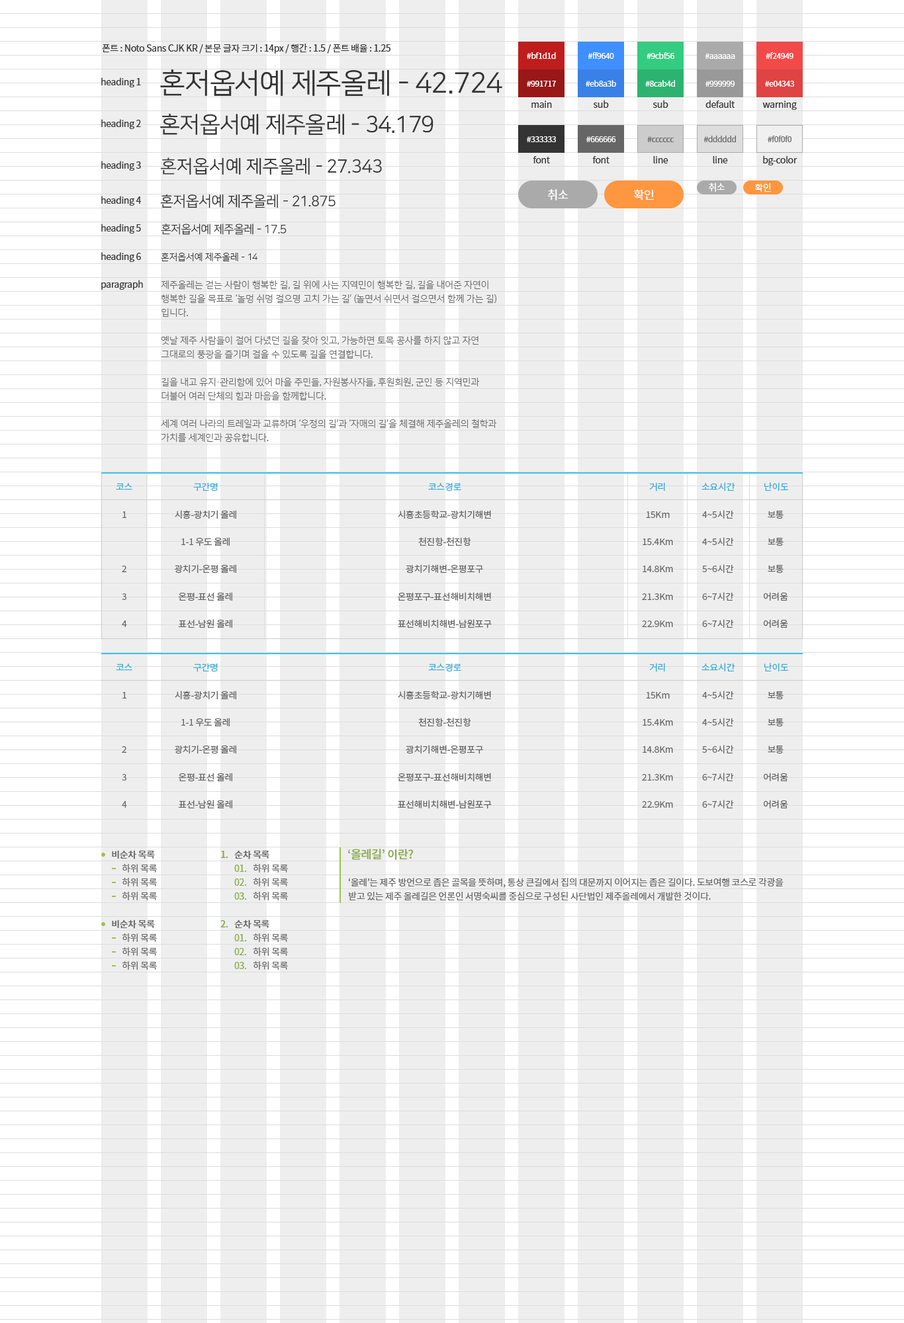
<style>
.page{position:relative;width:904px;height:1323px;background:#eeeeee}
.page>*{position:absolute;margin:0}
.t1{font:9.3px "NotoSansCJKkr-Regular";letter-spacing:-0.025em;color:#333333}
.t2{font:7.9px "NotoSansCJKkr-Regular";letter-spacing:-0.025em;color:#ffffff}
.t3{font:28.3px "NanumSquareR";letter-spacing:-0.025em;color:#333333}
.t4{font:22.6px "NanumSquareR";letter-spacing:-0.025em;color:#333333}
.t5{font:7.9px "NotoSansCJKkr-Regular";letter-spacing:-0.025em;color:#666666}
.t6{font:18.1px "NanumSquareR";letter-spacing:-0.025em;color:#333333}
.t7{font:9.3px "NotoSansCJKkr-Regular";letter-spacing:-0.025em;color:#ffffff}
.t8{font:14.5px "NanumSquareR";letter-spacing:-0.025em;color:#333333}
.t9{font:11.6px "NotoSansCJKkr-Regular";letter-spacing:-0.025em;color:#ffffff}
.t10{font:11.6px "NanumSquareR";letter-spacing:-0.025em;color:#333333}
.t11{font:9.3px "NanumSquareR";letter-spacing:-0.025em;color:#333333}
.t12{font:9.3px "NanumSquareR";letter-spacing:-0.025em;color:#666666}
.t13{font:9px "NotoSansCJKkr-Regular";letter-spacing:-0.025em;color:#36add9}
.t14{font:9px "NotoSansCJKkr-Regular";letter-spacing:-0.025em;color:#666666}
.t15{font:9.3px "NotoSansCJKkr-Medium";letter-spacing:-0.025em;color:#666666}
.t16{font:9.3px "NotoSansCJKkr-Medium";letter-spacing:-0.025em;color:#8cab4d}
.t17{font:11.6px "NotoSansCJKkr-Medium";letter-spacing:-0.025em;color:#8cab4d}
.t18{font:9.3px "NotoSansCJKkr-Regular";letter-spacing:-0.025em;color:#666666}
.t19{font:9.3px "NotoSansCJKkr-Regular";letter-spacing:-0.025em;color:#8cab4d}
</style>
<div class="page">
<p class="t1" style="left:102px;top:44px;width:288px;height:10px">폰트 : Noto Sans CJK KR / 본문 글자 크기 : 14px / 행간 : 1.5 / 폰트 배율 : 1.25</p>
<p class="t2" style="left:527px;top:52px;width:29px;height:7px">#bf1d1d</p>
<p class="t2" style="left:588px;top:52px;width:26px;height:7px">#ff9640</p>
<p class="t2" style="left:647px;top:52px;width:27px;height:7px">#9cbf56</p>
<p class="t2" style="left:705px;top:53px;width:30px;height:6px">#aaaaaa</p>
<p class="t2" style="left:766px;top:52px;width:27px;height:7px">#f24949</p>
<p class="t1" style="left:101px;top:77px;width:40px;height:10px">heading 1</p>
<p class="t3" style="left:160px;top:69px;width:342px;height:27px">혼저옵서예 제주올레 - 42.724</p>
<p class="t2" style="left:527px;top:81px;width:29px;height:6px">#991717</p>
<p class="t2" style="left:586px;top:80px;width:30px;height:7px">#eb8a3b</p>
<p class="t2" style="left:645px;top:80px;width:30px;height:7px">#8cab4d</p>
<p class="t2" style="left:705px;top:81px;width:30px;height:6px">#999999</p>
<p class="t2" style="left:765px;top:81px;width:29px;height:6px">#e04343</p>
<p class="t1" style="left:531px;top:101px;width:21px;height:7px">main</p>
<p class="t1" style="left:594px;top:100px;width:15px;height:8px">sub</p>
<p class="t1" style="left:653px;top:100px;width:15px;height:8px">sub</p>
<p class="t1" style="left:705px;top:100px;width:30px;height:8px">default</p>
<p class="t1" style="left:762px;top:101px;width:35px;height:9px">warning</p>
<p class="t4" style="left:160px;top:114px;width:273px;height:21px">혼저옵서예 제주올레 - 34.179</p>
<p class="t1" style="left:101px;top:119px;width:40px;height:10px">heading 2</p>
<p class="t2" style="left:527px;top:136px;width:29px;height:6px">#333333</p>
<p class="t2" style="left:586px;top:136px;width:30px;height:6px">#666666</p>
<p class="t5" style="left:647px;top:136px;width:27px;height:6px">#cccccc</p>
<p class="t5" style="left:703px;top:136px;width:33px;height:6px">#dddddd</p>
<p class="t5" style="left:768px;top:136px;width:23px;height:6px">#f0f0f0</p>
<p class="t1" style="left:101px;top:161px;width:40px;height:10px">heading 3</p>
<p class="t6" style="left:161px;top:157px;width:221px;height:18px">혼저옵서예 제주올레 - 27.343</p>
<p class="t1" style="left:533px;top:156px;width:17px;height:7px">font</p>
<p class="t1" style="left:592px;top:156px;width:17px;height:7px">font</p>
<p class="t1" style="left:653px;top:156px;width:15px;height:7px">line</p>
<p class="t1" style="left:713px;top:156px;width:15px;height:7px">line</p>
<p class="t1" style="left:763px;top:156px;width:34px;height:9px">bg-color</p>
<p class="t7" style="left:709px;top:183px;width:16px;height:9px">취소</p>
<p class="t7" style="left:755px;top:183px;width:16px;height:9px">확인</p>
<p class="t1" style="left:101px;top:196px;width:40px;height:10px">heading 4</p>
<p class="t8" style="left:160px;top:194px;width:176px;height:14px">혼저옵서예 제주올레 - 21.875</p>
<p class="t9" style="left:547px;top:189px;width:21px;height:12px">취소</p>
<p class="t9" style="left:634px;top:189px;width:20px;height:12px">확인</p>
<p class="t1" style="left:101px;top:224px;width:40px;height:10px">heading 5</p>
<p class="t10" style="left:161px;top:224px;width:126px;height:11px">혼저옵서예 제주올레 - 17.5</p>
<p class="t1" style="left:101px;top:252px;width:40px;height:10px">heading 6</p>
<p class="t11" style="left:161px;top:253px;width:96px;height:8px">혼저옵서예 제주올레 - 14</p>
<p class="t1" style="left:101px;top:280px;width:42px;height:10px">paragraph</p>
<p class="t12" style="left:161px;top:281px;width:335px;height:161px">제주올레는 걷는 사람이 행복한 길, 길 위에 사는 지역민이 행복한 길, 길을 내어준 자연이 행복한 길을 목표로 ‘놀멍 쉬멍 걸으명 고치 가는 길’ (놀면서 쉬면서 걸으면서 함께 가는 길) 입니다.<br>옛날 제주 사람들이 걸어 다녔던 길을 찾아 잇고, 가능하면 토목 공사를 하지 않고 자연 그대로의 풍광을 즐기며 걸을 수 있도록 길을 연결합니다.<br>길을 내고 유지·관리함에 있어 마을 주민들, 자원봉사자들, 후원회원, 군인 등 지역민과 더불어 여러 단체의 힘과 마음을 함께합니다.<br>세계 여러 나라의 트레일과 교류하며 ‘우정의 길’과 ‘자매의 길’을 체결해 제주올레의 철학과 가치를 세계인과 공유합니다.</p>
<p class="t13" style="left:116px;top:483px;width:16px;height:7px">코스</p>
<p class="t13" style="left:193px;top:482px;width:25px;height:10px">구간명</p>
<p class="t13" style="left:428px;top:483px;width:33px;height:9px">코스경로</p>
<p class="t13" style="left:649px;top:482px;width:16px;height:10px">거리</p>
<p class="t13" style="left:701px;top:482px;width:34px;height:9px">소요시간</p>
<p class="t13" style="left:764px;top:482px;width:25px;height:9px">난이도</p>
<p class="t14" style="left:122px;top:512px;width:5px;height:115px;text-align:center">1<br><br>2<br>3<br>4</p>
<p class="t14" style="left:175px;top:510px;width:61px;height:119px;text-align:center">시흥-광치기 올레<br>1-1 우도 올레<br>광치기-온평 올레<br>온평-표선 올레<br>표선-남원 올레</p>
<p class="t14" style="left:398px;top:510px;width:94px;height:119px;text-align:center">시흥초등학교-광치기해변<br>천진항-천진항<br>광치기해변-온평포구<br>온평포구-표선해비치해변<br>표선해비치해변-남원포구</p>
<p class="t14" style="left:642px;top:512px;width:31px;height:115px;text-align:center">15Km<br>15.4Km<br>14.8Km<br>21.3Km<br>22.9Km</p>
<p class="t14" style="left:702px;top:510px;width:32px;height:118px;text-align:center">4~5시간<br>4~5시간<br>5~6시간<br>6~7시간<br>6~7시간</p>
<p class="t14" style="left:764px;top:511px;width:24px;height:117px;text-align:center">보통<br>보통<br>보통<br>어려움<br>어려움</p>
<p class="t13" style="left:116px;top:664px;width:16px;height:7px">코스</p>
<p class="t13" style="left:193px;top:663px;width:25px;height:9px">구간명</p>
<p class="t13" style="left:428px;top:664px;width:33px;height:8px">코스경로</p>
<p class="t13" style="left:649px;top:663px;width:16px;height:9px">거리</p>
<p class="t13" style="left:701px;top:663px;width:34px;height:9px">소요시간</p>
<p class="t13" style="left:764px;top:663px;width:25px;height:9px">난이도</p>
<p class="t14" style="left:122px;top:692px;width:5px;height:116px;text-align:center">1<br><br>2<br>3<br>4</p>
<p class="t14" style="left:175px;top:691px;width:61px;height:118px;text-align:center">시흥-광치기 올레<br>1-1 우도 올레<br>광치기-온평 올레<br>온평-표선 올레<br>표선-남원 올레</p>
<p class="t14" style="left:398px;top:691px;width:94px;height:118px;text-align:center">시흥초등학교-광치기해변<br>천진항-천진항<br>광치기해변-온평포구<br>온평포구-표선해비치해변<br>표선해비치해변-남원포구</p>
<p class="t14" style="left:642px;top:692px;width:31px;height:116px;text-align:center">15Km<br>15.4Km<br>14.8Km<br>21.3Km<br>22.9Km</p>
<p class="t14" style="left:702px;top:691px;width:32px;height:118px;text-align:center">4~5시간<br>4~5시간<br>5~6시간<br>6~7시간<br>6~7시간</p>
<p class="t14" style="left:764px;top:692px;width:24px;height:117px;text-align:center">보통<br>보통<br>보통<br>어려움<br>어려움</p>
<p class="t15" style="left:112px;top:850px;width:43px;height:79px">비순차 목록<br><br><br><br><br>비순차 목록</p>
<p class="t16" style="left:220px;top:851px;width:8px;height:77px">1.<br><br><br><br><br>2.</p>
<p class="t15" style="left:234px;top:850px;width:35px;height:79px">순차 목록<br><br><br><br><br>순차 목록</p>
<p class="t17" style="left:348px;top:849px;width:66px;height:11px">‘올레길’ 이란?</p>
<p class="t18" style="left:122px;top:864px;width:35px;height:106px">하위 목록<br>하위 목록<br>하위 목록<br><br><br>하위 목록<br>하위 목록<br>하위 목록</p>
<p class="t19" style="left:234px;top:865px;width:13px;height:104px">01.<br>02.<br>03.<br><br><br>01.<br>02.<br>03.</p>
<p class="t18" style="left:253px;top:864px;width:35px;height:106px">하위 목록<br>하위 목록<br>하위 목록<br><br><br>하위 목록<br>하위 목록<br>하위 목록</p>
<p class="t18" style="left:348px;top:878px;width:436px;height:23px">‘올레’는 제주 방언으로 좁은 골목을 뜻하며, 통상 큰길에서 집의 대문까지 이어지는 좁은 길이다. 도보여행 코스로 각광을 받고 있는 제주 올레길은 언론인 서명숙씨를 중심으로 구성된 사단법인 제주올레에서 개발한 것이다.</p>
</div>
